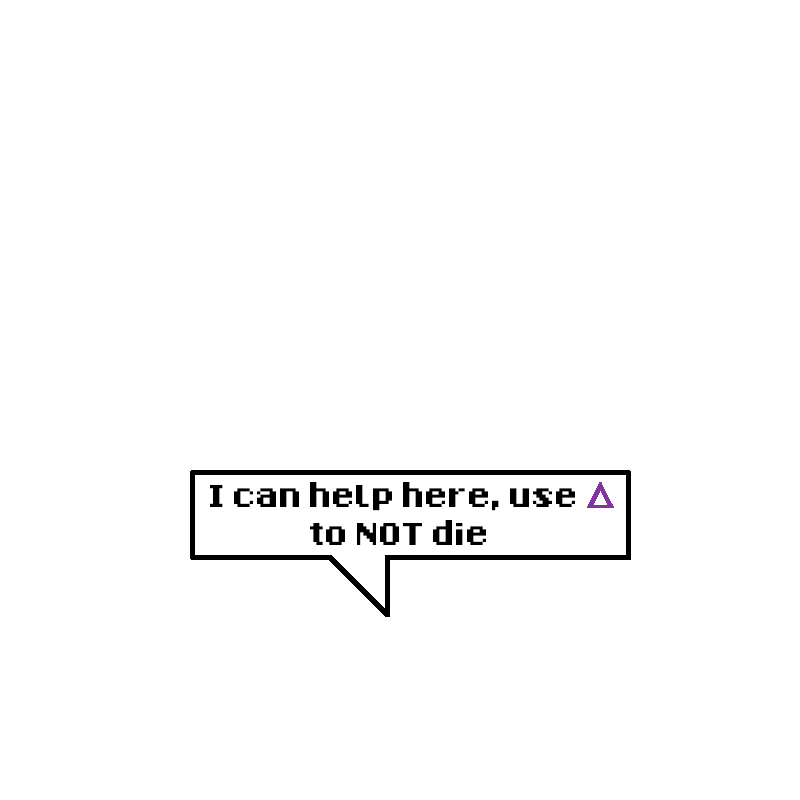
<style>
.page{position:relative;width:800px;height:800px;background:#ffffff}
.page>*{position:absolute;margin:0}
.t1{font:12px/37.5px "8-Bit-Madness";letter-spacing:-0.04em;color:#000000}
</style>
<div class="page">
<p class="t1" style="left:210px;top:482px;width:365px;height:63px;text-align:center">I can help here, use <br>to NOT die</p>
</div>
